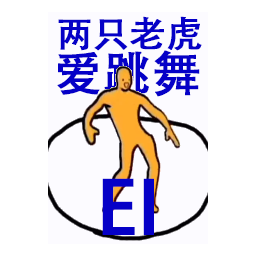
<style>
.page{position:relative;width:256px;height:256px;background:#ffffff}
.page>*{position:absolute;margin:0}
.t1{font:36px "AdobeHeitiStd-Regular";color:#0500c7;font-weight:bold}
.t2{font:48px "AdobeHeitiStd-Regular";color:#0500c7;font-weight:bold}
.t3{font:72px "AdobeHeitiStd-Regular";color:#0500c7;font-weight:bold}
</style>
<div class="page">
<p class="t1" style="left:58px;top:16px;width:144px;height:35px">两只老虎</p>
<p class="t2" style="left:57px;top:50px;width:143px;height:47px">爱跳舞</p>
<p class="t3" style="left:102px;top:178px;width:52px;height:57px">EI</p>
</div>
